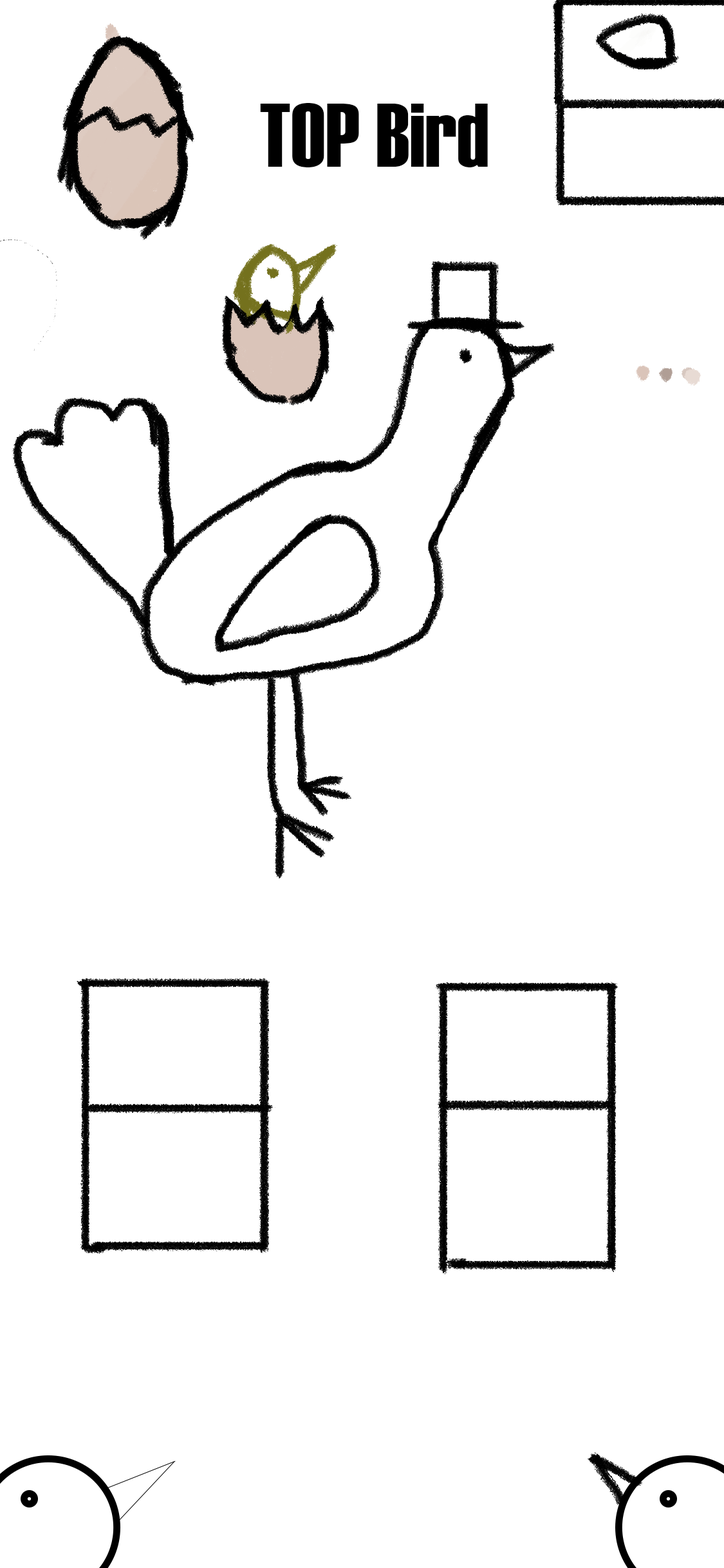
<style>
.page{position:relative;width:724px;height:1568px;background:#ffffff}
.page>*{position:absolute;margin:0}
.t1{font:90.1px "Haettenschweiler";color:#000000}
</style>
<div class="page">
<p class="t1" style="left:260px;top:103px;width:228px;height:64px">TOP Bird</p>
</div>
